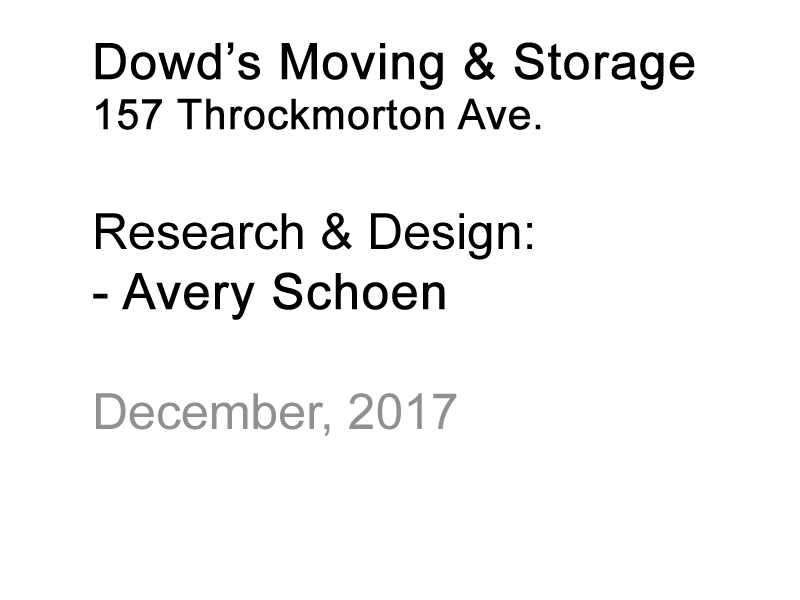
<style>
.page{position:relative;width:800px;height:600px;background:#ffffff}
.page>*{position:absolute;margin:0}
.t1{font:50px "ArialMT";color:#000000;font-weight:bold}
.t2{font:41.7px "ArialMT";color:#000000;font-weight:bold}
.t3{font:50px "ArialMT";color:#000000}
.t4{font:50px "ArialMT";color:#919090}
</style>
<div class="page">
<p class="t1" style="left:93px;top:42px;width:602px;height:395px">Dowd’s Moving &amp; Storage<br><span class="t2">157 Throckmorton Ave.<br></span><span class="t3"><br>Research &amp; Design:<br></span>- Avery Schoen<br><br><span class="t4">December, 2017</span></p>
</div>
